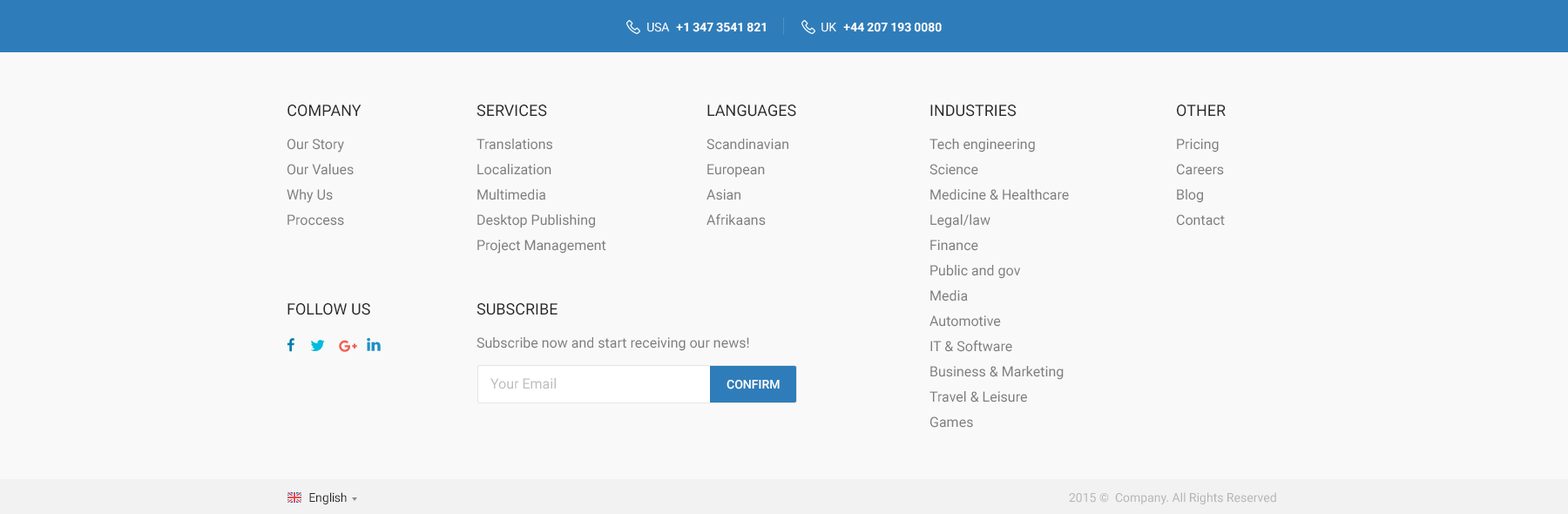
<style>
.page{position:relative;width:1568px;height:514px;background:#f9f9f9}
.page>*{position:absolute;margin:0}
.t1{font:12.2px "Roboto-Regular";color:#ffffff}
.t2{font:12.2px "Roboto-Bold";color:#ffffff}
.t3{font:15.7px "Roboto-Regular";color:#272727}
.t4{font:15.7px "Roboto-Regular";color:#272727;text-transform:uppercase}
.t5{font:13.9px "Roboto-Regular";color:#7d7d7d}
.t6{font:13.9px "Roboto-Regular";color:#bdbdbd}
.t7{font:12.2px "Roboto-Medium";color:#ffffff;text-transform:uppercase}
.t8{font:12.2px "Roboto-Regular";color:#262626}
.t9{font:12.2px "Roboto-Regular";color:#b4b4b4}
</style>
<div class="page">
<p class="t1" style="left:647px;top:23px;width:23px;height:9px">USA</p>
<p class="t2" style="left:676px;top:23px;width:90px;height:9px">+1 347 3541 821</p>
<p class="t1" style="left:821px;top:23px;width:15px;height:9px">UK</p>
<p class="t2" style="left:843px;top:23px;width:99px;height:9px">+44 207 193 0080</p>
<p class="t3" style="left:287px;top:105px;width:75px;height:12px">COMPANY</p>
<p class="t3" style="left:476px;top:105px;width:71px;height:12px">SERVICES</p>
<p class="t4" style="left:707px;top:105px;width:89px;height:12px">Languages</p>
<p class="t4" style="left:930px;top:105px;width:86px;height:12px">Industries</p>
<p class="t4" style="left:1177px;top:105px;width:49px;height:12px">Other</p>
<p class="t5" style="left:287px;top:139px;width:57px;height:13px">Our Story</p>
<p class="t5" style="left:476px;top:139px;width:76px;height:11px">Translations</p>
<p class="t5" style="left:706px;top:139px;width:82px;height:11px">Scandinavian</p>
<p class="t5" style="left:929px;top:139px;width:106px;height:13px">Tech engineering</p>
<p class="t5" style="left:1177px;top:139px;width:42px;height:13px">Pricing</p>
<p class="t5" style="left:287px;top:164px;width:67px;height:11px">Our Values</p>
<p class="t5" style="left:477px;top:164px;width:74px;height:11px">Localization</p>
<p class="t5" style="left:707px;top:164px;width:58px;height:14px">European</p>
<p class="t5" style="left:929px;top:164px;width:49px;height:11px">Science</p>
<p class="t5" style="left:1177px;top:164px;width:47px;height:11px">Careers</p>
<p class="t5" style="left:287px;top:189px;width:46px;height:14px">Why Us</p>
<p class="t5" style="left:477px;top:189px;width:68px;height:11px">Multimedia</p>
<p class="t5" style="left:706px;top:189px;width:34px;height:11px">Asian</p>
<p class="t5" style="left:930px;top:189px;width:139px;height:11px">Medicine &amp; Healthcare</p>
<p class="t5" style="left:1177px;top:189px;width:26px;height:14px">Blog</p>
<p class="t5" style="left:287px;top:214px;width:57px;height:12px">Proccess</p>
<p class="t5" style="left:477px;top:214px;width:118px;height:14px">Desktop Publishing</p>
<p class="t5" style="left:706px;top:213px;width:60px;height:13px">Afrikaans</p>
<p class="t5" style="left:930px;top:214px;width:60px;height:14px">Legal/law</p>
<p class="t5" style="left:1177px;top:214px;width:48px;height:12px">Contact</p>
<p class="t5" style="left:477px;top:240px;width:129px;height:13px">Project Management</p>
<p class="t5" style="left:930px;top:240px;width:48px;height:11px">Finance</p>
<p class="t5" style="left:930px;top:265px;width:91px;height:14px">Public and gov</p>
<p class="t5" style="left:930px;top:290px;width:38px;height:11px">Media</p>
<p class="t3" style="left:287px;top:303px;width:83px;height:12px">FOLLOW US</p>
<p class="t3" style="left:476px;top:303px;width:82px;height:12px">SUBSCRIBE</p>
<p class="t5" style="left:929px;top:315px;width:72px;height:12px">Automotive</p>
<p class="t5" style="left:476px;top:337px;width:273px;height:14px">Subscribe now and start receiving our news!</p>
<p class="t5" style="left:930px;top:340px;width:82px;height:12px">IT &amp; Software</p>
<p class="t5" style="left:930px;top:366px;width:134px;height:14px">Business &amp; Marketing</p>
<p class="t6" style="left:490px;top:378px;width:66px;height:11px">Your Email</p>
<p class="t7" style="left:727px;top:380px;width:53px;height:9px">CONFIRM</p>
<p class="t5" style="left:929px;top:391px;width:98px;height:11px">Travel &amp; Leisure</p>
<p class="t5" style="left:930px;top:416px;width:43px;height:12px">Games</p>
<p class="t8" style="left:309px;top:492px;width:38px;height:12px">English</p>
<p class="t9" style="left:1069px;top:492px;width:207px;height:12px">2015 ©  Company. All Rights Reserved</p>
</div>
